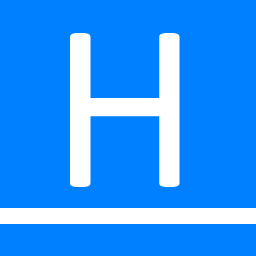
<style>
.page{position:relative;width:256px;height:256px;background:#0080ff}
.page>*{position:absolute;margin:0}
.t1{font:240px "Calibri";color:#ffffff}
</style>
<div class="page">
<p class="t1" style="left:70px;top:33px;width:110px;height:154px">H</p>
</div>
